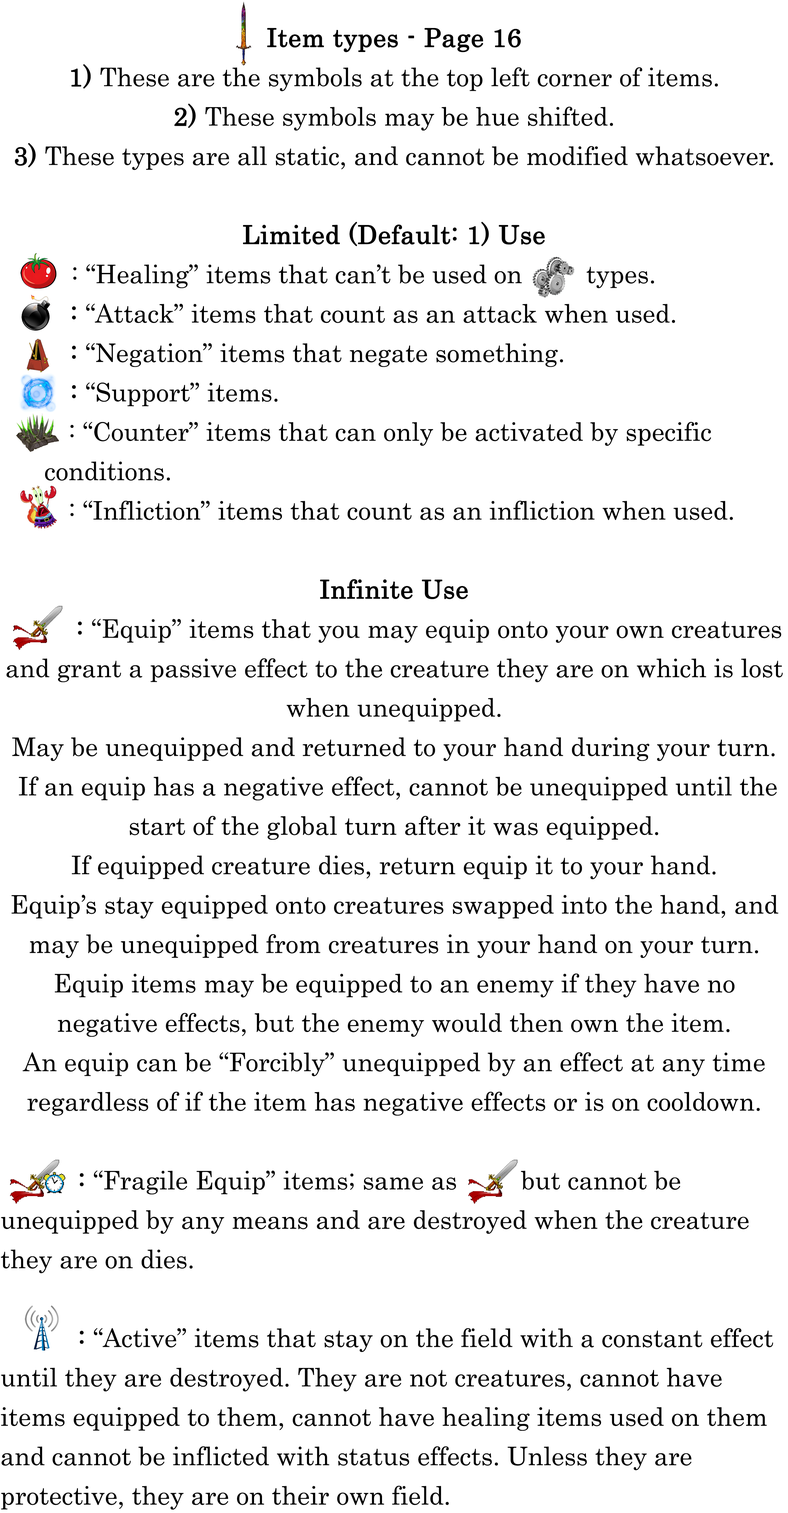
<style>
.page{position:relative;width:788px;height:1513px;background:#ffffff}
.page>*{position:absolute;margin:0}
.t1{font:43.8px/39.4px "Century";color:#000000}
.t2{font:43.8px/39.4px "Century";color:#000000;font-weight:bold}
</style>
<div class="page">
<p class="t1" style="left:1px;top:28px;width:782px;height:1482px;text-align:center"><span class="t2">Item types - Page 16<br>1)</span> These are the symbols at the top left corner of items.<br><span class="t2">2)</span> These symbols may be hue shifted.<br><span class="t2">3)</span> These types are all static, and cannot be modified whatsoever.<br><br><span class="t2">Limited (Default: 1) Use<br></span>          : “Healing” items that can’t be used on         types.<br><span class="t2">         :</span> “Attack” items that count as an attack when used.<br><span class="t2">         :</span> “Negation” items that negate something.<br><span class="t2">         :</span> “Support” items.<br>      : “Counter” items that can only be activated by specific               conditions.<br>      : “Infliction” items that count as an infliction when used.<br><br><span class="t2">Infinite Use<br>         :</span> “Equip” items that you may equip onto your own creatures and grant a passive effect to the creature they are on which is lost when unequipped. <br>May be unequipped and returned to your hand during your turn.<br> If an equip has a negative effect, cannot be unequipped until the start of the global turn after it was equipped. <br>If equipped creature dies, return equip it to your hand. <br>Equip’s stay equipped onto creatures swapped into the hand, and may be unequipped from creatures in your hand on your turn.<br>Equip items may be equipped to an enemy if they have no negative effects, but the enemy would then own the item.<br>An equip can be “Forcibly” unequipped by an effect at any time regardless of if the item has negative effects or is on cooldown.<br><br><span class="t2">          :</span> “Fragile Equip” items; same as         but cannot be unequipped by any means and are destroyed when the creature they are on dies.<br><br><span class="t2">          :</span> “Active” items that stay on the field with a constant effect until they are destroyed. They are not creatures, cannot have items equipped to them, cannot have healing items used on them and cannot be inflicted with status effects. Unless they are protective, they are on their own field.</p>
</div>
